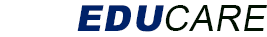
<style>
.page{position:relative;width:267px;height:37px;background:#ffffff}
.page>*{position:absolute;margin:0}
.t1{font:36px "ArialMT";color:#001000;text-transform:uppercase;font-style:italic}
.t2{font:36px "Arial-Black";color:#002269;text-transform:uppercase;font-style:italic}
</style>
<div class="page">
<p class="t1" style="left:77px;top:5px;width:190px;height:27px"><span class="t2">Edu</span>care</p>
</div>
